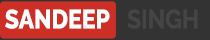
<style>
.page{position:relative;width:210px;height:40px;background:#333333}
.page>*{position:absolute;margin:0}
.t1{font:26.4px "Raleway-ExtraBold";color:#ffffff;scale:0.87 1}
.t2{font:26.4px "Raleway-Bold";color:#454545;scale:0.87 1}
</style>
<div class="page">
<p class="t1" style="left:5px;top:9px;width:105px;height:20px">SANDEEP</p>
<p class="t2" style="left:127px;top:9px;width:71px;height:20px">SINGH</p>
</div>
